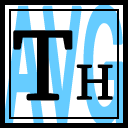
<style>
.page{position:relative;width:128px;height:128px;background:#000000}
.page>*{position:absolute;margin:0}
.t1{font:174px "Shruti-Bold";color:#66ccff;font-weight:bold;scale:0.34 1}
.t2{font:100px "Sylfaen";color:#000000;font-weight:bold}
.t3{font:50px "Sylfaen";color:#000000;font-weight:bold}
</style>
<div class="page">
<p class="t1" style="left:3px;top:4px;width:121px;height:122px">AVG</p>
<p class="t2" style="left:13px;top:30px;width:100px;height:71px">T<span class="t3">H</span></p>
</div>
